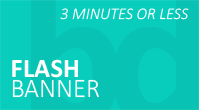
<style>
.page{position:relative;width:199px;height:110px;background:#08c3b3}
.page>*{position:absolute;margin:0}
.t1{font:16.2px "Calibri-LightItalic";color:#ffffff}
.t2{font:26.6px "Calibri-Bold";color:#ffffff}
.t3{font:26.6px "Calibri-Light";color:#ffffff}
</style>
<div class="page">
<p class="t1" style="left:60px;top:8px;width:129px;height:12px">3 MINUTES OR LESS</p>
<p class="t2" style="left:12px;top:59px;width:66px;height:19px">FLASH</p>
<p class="t3" style="left:12px;top:79px;width:87px;height:19px">BANNER</p>
</div>
